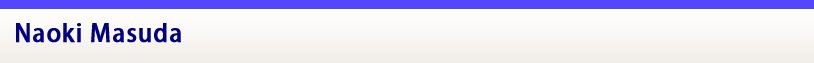
<style>
.page{position:relative;width:814px;height:63px}
.page>*{position:absolute;margin:0}
.t1{font:24px "KozGoPro-Medium";letter-spacing:0.025em;color:#000080;font-weight:bold}
</style>
<div class="page">
<p class="t1" style="left:16px;top:23px;width:165px;height:20px">Naoki Masuda</p>
</div>
